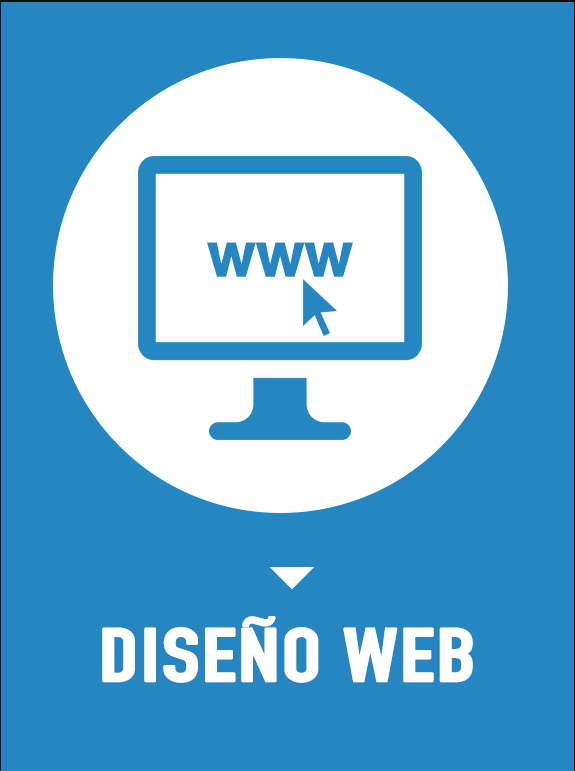
<style>
.page{position:relative;width:575px;height:771px;background:#2686c2}
.page>*{position:absolute;margin:0}
.t1{font:73.6px "DINCondensed-Bold";color:#ffffff;font-weight:bold;scale:1.25 1}
</style>
<div class="page">
<p class="t1" style="left:102px;top:616px;width:371px;height:67px">DISEÑO WEB</p>
</div>
